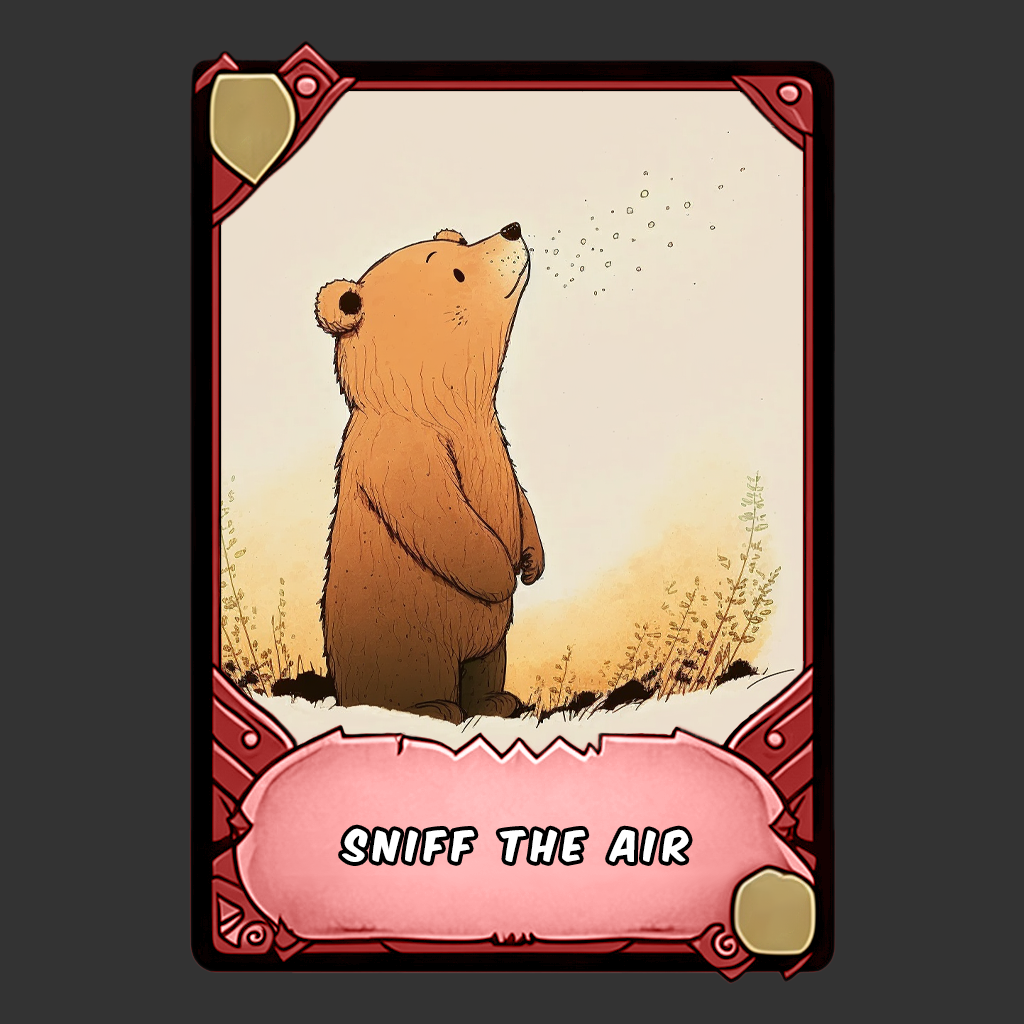
<style>
.page{position:relative;width:1024px;height:1024px;background:#333333}
.page>*{position:absolute;margin:0}
.t1{font:36px "KomikaAxis";letter-spacing:0.2em;color:#ffffff}
</style>
<div class="page">
<p class="t1" style="left:342px;top:828px;width:347px;height:34px">sniff the air</p>
</div>
